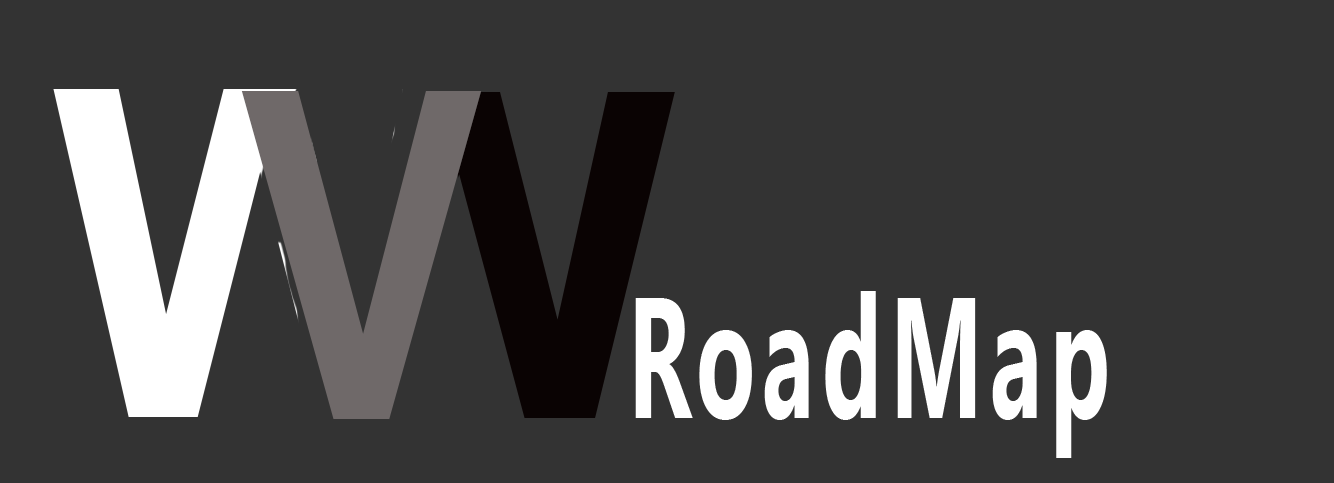
<style>
.page{position:relative;width:1334px;height:483px;background:#333333}
.page>*{position:absolute;margin:0}
.t1{font:785.1px "Arial-BoldMT";letter-spacing:0.08em;color:#6f6969;scale:0.78 1}
.t2{font:294.6px "LeelawadeeUI-Bold";letter-spacing:0.08em;color:#ffffff;scale:0.56 1}
</style>
<div class="page">
<p class="t1" style="left:241px;top:91px;width:241px;height:328px">V</p>
<p class="t2" style="left:635px;top:291px;width:472px;height:167px">RoadMap</p>
</div>
